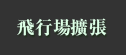
<style>
.page{position:relative;width:126px;height:55px;background:#333333}
.page>*{position:absolute;margin:0}
.t1{font:18px "RyuminPr6N-ExBold";color:#ddffe6}
</style>
<div class="page">
<p class="t1" style="left:17px;top:18px;width:90px;height:18px">飛行場擴張</p>
</div>
